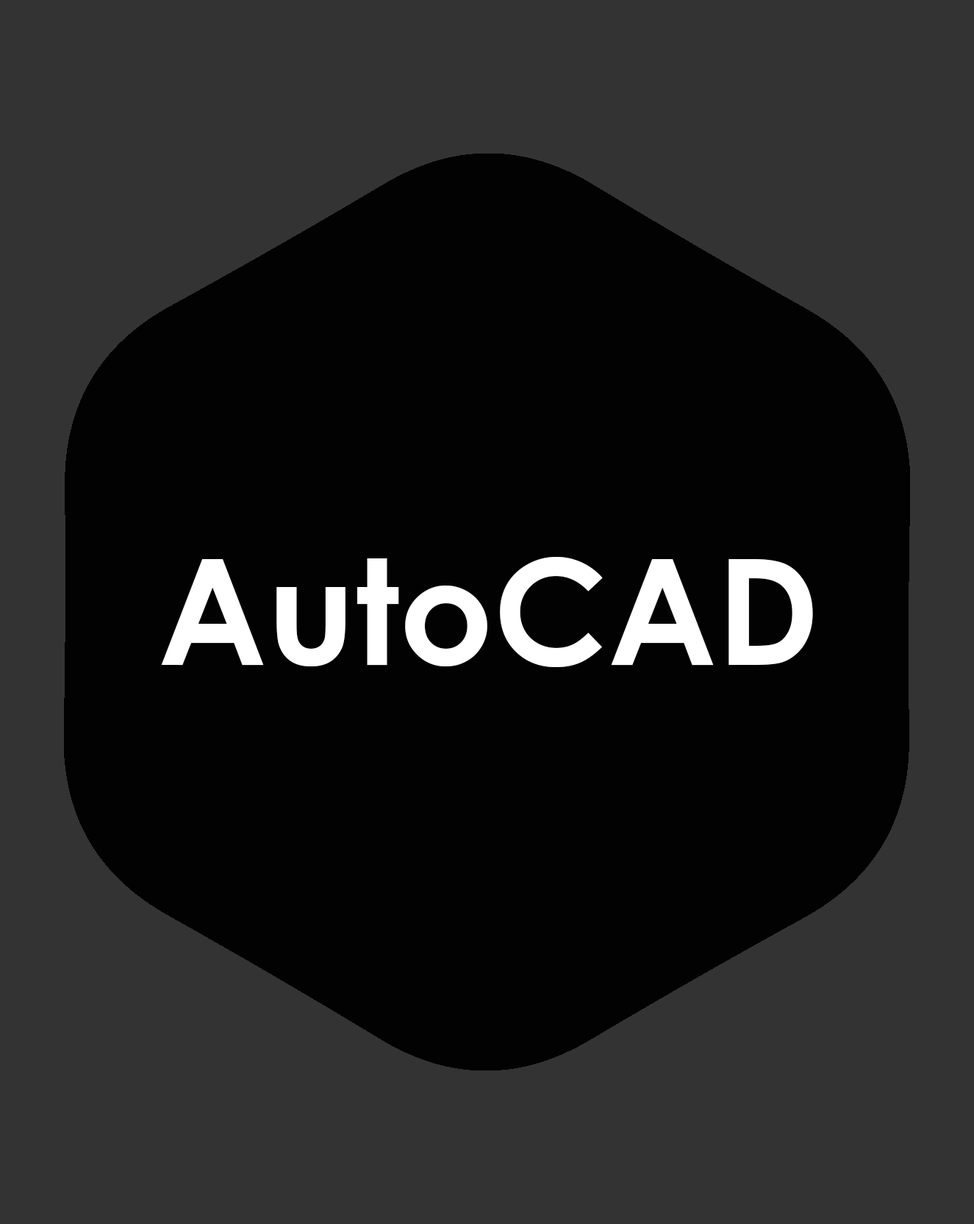
<style>
.page{position:relative;width:974px;height:1224px;background:#333333}
.page>*{position:absolute;margin:0}
.t1{font:147px "CenturyGothic-Bold";color:#ffffff}
</style>
<div class="page">
<p class="t1" style="left:161px;top:557px;width:652px;height:110px">AutoCAD</p>
</div>
